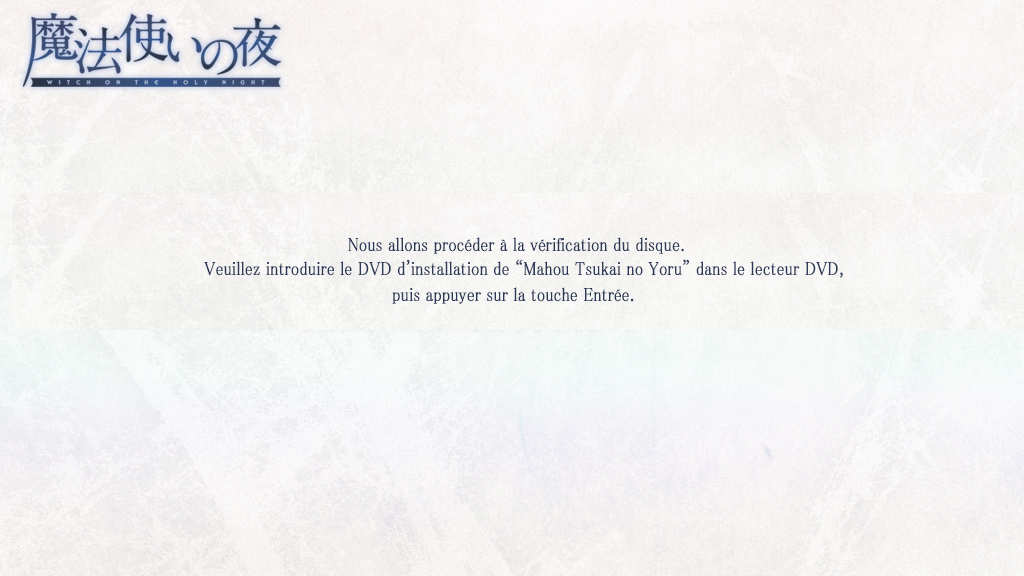
<style>
.page{position:relative;width:1024px;height:576px}
.page>*{position:absolute;margin:0}
.t1{font:19px "MS-PMincho";color:#2b3958;font-weight:bold;scale:0.84 1}
</style>
<div class="page">
<p class="t1" style="left:204px;top:237px;width:639px;height:41px">Nous allons procéder à la vérification du disque.<br>                                     Veuillez introduire le DVD d'installation de “Mahou Tsukai no Yoru” dans le lecteur DVD,</p>
<p class="t1" style="left:392px;top:287px;width:242px;height:17px">puis appuyer sur la touche Entrée.</p>
</div>
